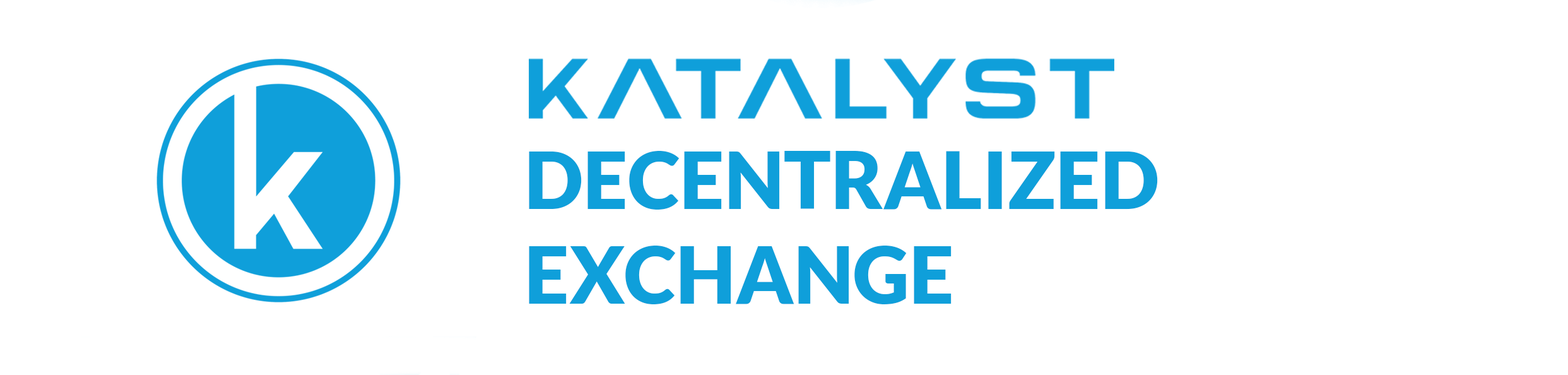
<style>
.page{position:relative;width:1568px;height:375px;background:#ffffff}
.page>*{position:absolute;margin:0}
.t1{font:78.9px "Lato-Black";color:#0f9fda}
</style>
<div class="page">
<p class="t1" style="left:529px;top:151px;width:629px;height:153px">DECENTRALIZED <br>EXCHANGE</p>
</div>
